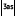
<style>
.page{position:relative;width:16px;height:16px;background:#ffffff}
.page>*{position:absolute;margin:0}
.t1{font:7.2px "PTSans-Regular";color:#000000}
</style>
<div class="page">
<p class="t1" style="left:3px;top:3px;width:11px;height:7px">3as</p>
</div>
